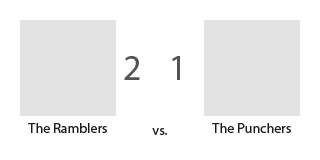
<style>
.page{position:relative;width:320px;height:160px;background:#ffffff}
.page>*{position:absolute;margin:0}
.t1{font:36px "MyriadPro-Regular";color:#525252}
.t2{font:14px "MyriadPro-Regular";color:#1c1c1c}
</style>
<div class="page">
<p class="t1" style="left:124px;top:56px;width:16px;height:24px">2</p>
<p class="t1" style="left:172px;top:56px;width:8px;height:24px">1</p>
<p class="t2" style="left:28px;top:123px;width:79px;height:10px">The Ramblers</p>
<p class="t2" style="left:212px;top:123px;width:79px;height:10px">The Punchers</p>
<p class="t2" style="left:152px;top:128px;width:15px;height:7px">vs.</p>
</div>
